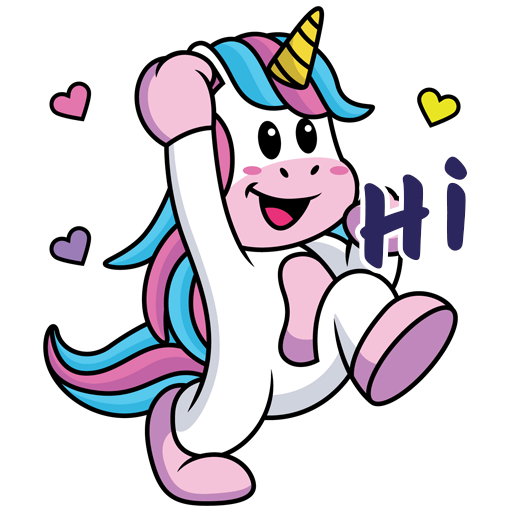
<style>
.page{position:relative;width:512px;height:512px;background:#ffffff}
.page>*{position:absolute;margin:0}
.t1{font:125px "Kalam-Bold";letter-spacing:0.025em;color:#2c265e;font-weight:bold}
</style>
<div class="page">
<p class="t1" style="left:359px;top:156px;width:109px;height:113px;rotate:-13deg">Hi</p>
</div>
